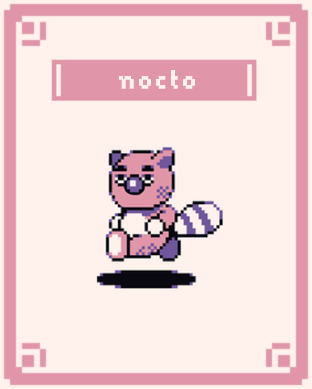
<style>
.page{position:relative;width:312px;height:389px;background:#fff1eb}
.page>*{position:absolute;margin:0}
.t1{font:48px "HeartbitXX2Px";color:#fff1eb;font-weight:bold;scale:0.9 1}
</style>
<div class="page">
<p class="t1" style="left:119px;top:70px;width:76px;height:19px">nocto</p>
</div>
